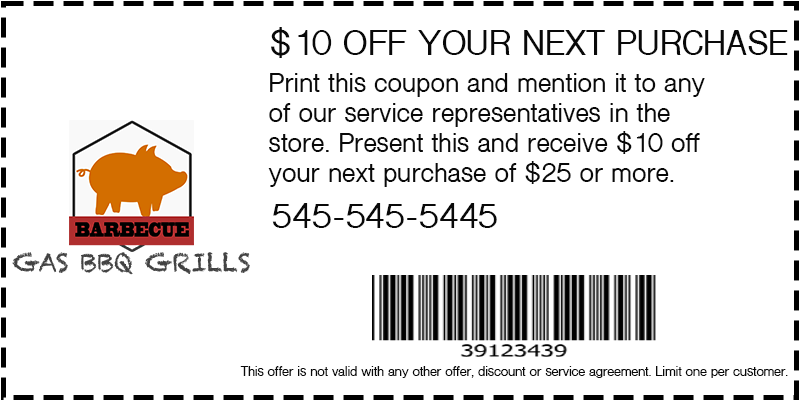
<style>
.page{position:relative;width:800px;height:400px;background:#ffffff}
.page>*{position:absolute;margin:0}
.t1{font:33.3px "ShreeDev0714-Bold";color:#090909}
.t2{font:25px "ShreeDev0714-Bold";color:#090909}
.t3{font:12.5px "ShreeDev0714-Bold";color:#090909}
</style>
<div class="page">
<p class="t1" style="left:271px;top:27px;width:517px;height:31px">$10 OFF YOUR NEXT PURCHASE</p>
<p class="t2" style="left:268px;top:73px;width:437px;height:114px">Print this coupon and mention it to any<br>of our service representatives in the<br>store. Present this and receive $10 off<br>your next purchase of $25 or more.</p>
<p class="t1" style="left:272px;top:203px;width:225px;height:25px">545-545-5445</p>
<p class="t3" style="left:240px;top:366px;width:548px;height:12px">This offer is not valid with any other offer, discount or service agreement. Limit one per customer.</p>
</div>
